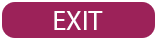
<style>
.page{position:relative;width:157px;height:40px;background:#9c2259}
.page>*{position:absolute;margin:0}
.t1{font:28px "MyriadPro-Regular";color:#ffffff}
</style>
<div class="page">
<p class="t1" style="left:54px;top:11px;width:49px;height:19px">EXIT</p>
</div>
